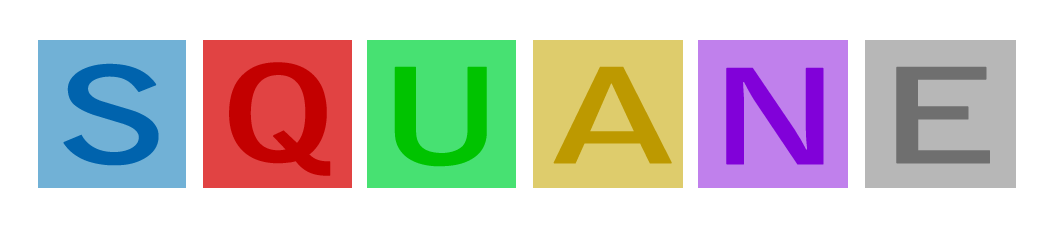
<style>
.page{position:relative;width:1056px;height:240px;background:#ffffff}
.page>*{position:absolute;margin:0}
.t1{font:130px "BellGothicStd-Bold";letter-spacing:0.005em;color:#0063ad;font-weight:bold;scale:1.5 1}
.t2{font:130px "BellGothicStd-Bold";letter-spacing:0.005em;color:#c30000;font-weight:bold;scale:1.5 1}
.t3{font:130px "BellGothicStd-Bold";letter-spacing:0.005em;color:#00c300;font-weight:bold;scale:1.5 1}
.t4{font:130px "BellGothicStd-Bold";letter-spacing:0.005em;color:#bd9900;font-weight:bold;scale:1.5 1}
.t5{font:130px "BellGothicStd-Bold";letter-spacing:0.005em;color:#8101d9;font-weight:bold;scale:1.5 1}
.t6{font:130px "BellGothicStd-Bold";letter-spacing:0.005em;color:#6f6f6f;font-weight:bold;scale:1.5 1}
</style>
<div class="page">
<p class="t1" style="left:63px;top:63px;width:96px;height:103px">S</p>
<p class="t2" style="left:229px;top:62px;width:102px;height:114px">Q</p>
<p class="t3" style="left:394px;top:66px;width:93px;height:101px">U</p>
<p class="t4" style="left:553px;top:66px;width:119px;height:98px">A</p>
<p class="t5" style="left:726px;top:67px;width:98px;height:98px">N</p>
<p class="t6" style="left:896px;top:66px;width:94px;height:98px">E</p>
</div>
